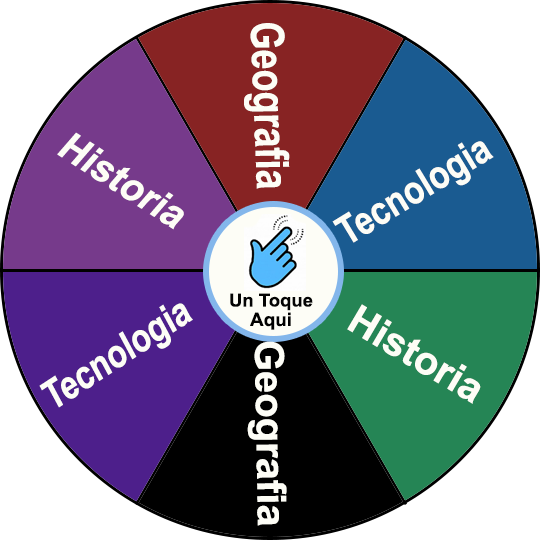
<style>
.page{position:relative;width:540px;height:540px;background:#ffffff}
.page>*{position:absolute;margin:0}
.t1{font:45.9px "Arial-BoldMT";color:#fdfdf6;scale:0.78 1}
.t2{font:40px "Arial-BoldMT";color:#fdfdf6;scale:0.95 1}
.t3{font:40px "Arial-BoldMT";color:#fdfdf6;scale:0.83 1}
.t4{font:18.1px "Arial-BoldMT";color:#040404}
.t5{font:40px "Arial-BoldMT";color:#fdfdf6;scale:0.81 1}
.t6{font:40px "Arial-BoldMT";color:#fdfdf6}
.t7{font:18.6px "Arial-BoldMT";color:#010101}
</style>
<div class="page">
<p class="t1" style="left:244px;top:23px;width:46px;height:166px;rotate:88deg">Geografia</p>
<p class="t2" style="left:57px;top:132px;width:127px;height:98px;rotate:33deg">Historia</p>
<p class="t3" style="left:332px;top:141px;width:162px;height:102px;rotate:-31deg">Tecnologia</p>
<p class="t4" style="left:230px;top:293px;width:83px;height:18px">Un Toque</p>
<p class="t5" style="left:39px;top:303px;width:154px;height:105px;rotate:-33deg">Tecnologia</p>
<p class="t6" style="left:347px;top:304px;width:134px;height:100px;rotate:31deg">Historia</p>
<p class="t7" style="left:250px;top:312px;width:41px;height:18px">Aqui</p>
<p class="t6" style="left:247px;top:341px;width:40px;height:185px;rotate:89deg">Geografia</p>
</div>
